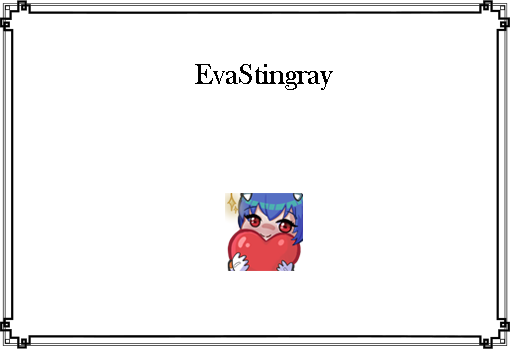
<style>
.page{position:relative;width:510px;height:349px;background:#ffffff}
.page>*{position:absolute;margin:0}
.t1{font:30px "BaskOldFace";color:#000000}
</style>
<div class="page">
<p class="t1" style="left:195px;top:64px;width:138px;height:26px">EvaStingray</p>
</div>
